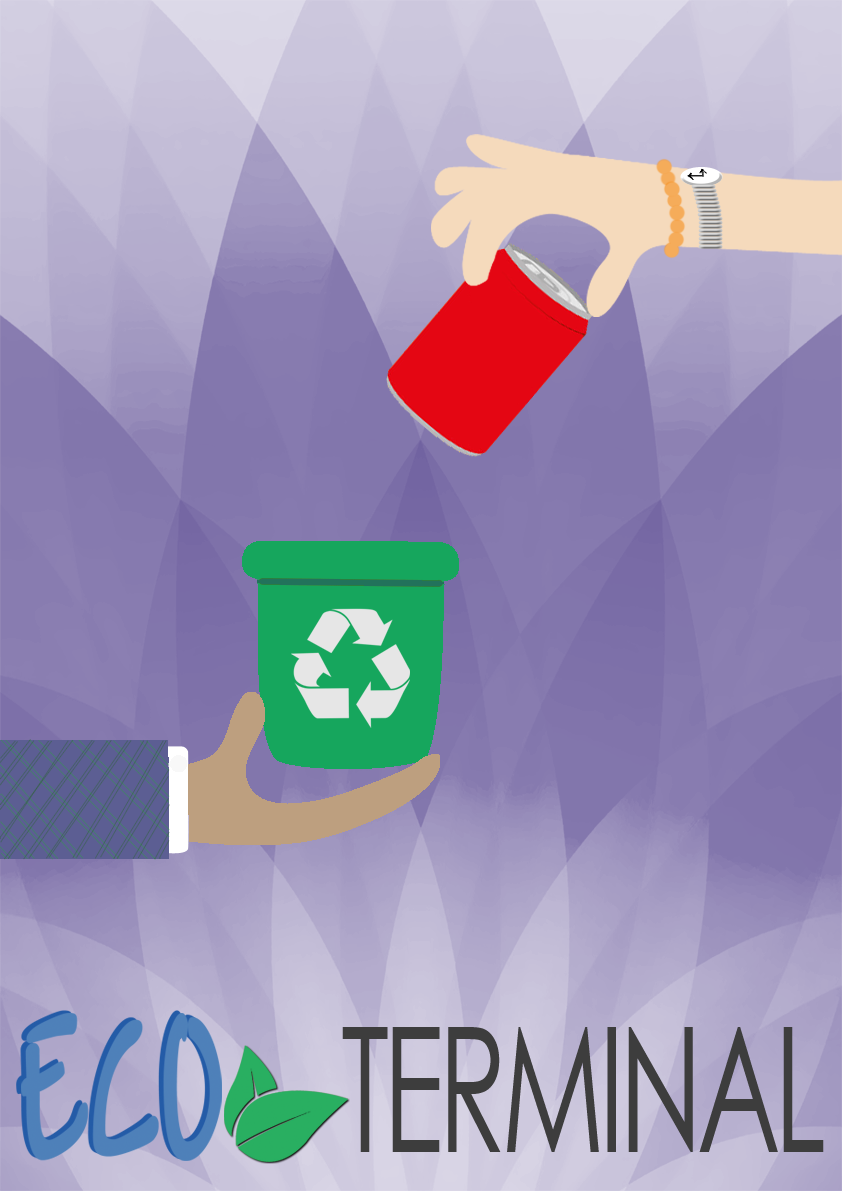
<style>
.page{position:relative;width:842px;height:1191px}
.page>*{position:absolute;margin:0}
.t1{font:228.3px "Andy-Bold";color:#4e80b9;scale:0.54 1}
.t2{font:173.8px "CenturyGothic";letter-spacing:-0.05em;color:#3d3d3d;scale:0.65 1}
</style>
<div class="page">
<p class="t1" style="left:16px;top:1010px;width:201px;height:149px">ECO</p>
<p class="t1" style="left:21px;top:1013px;width:201px;height:148px">ECO</p>
<p class="t2" style="left:342px;top:1027px;width:482px;height:125px">TERMINAL</p>
</div>
